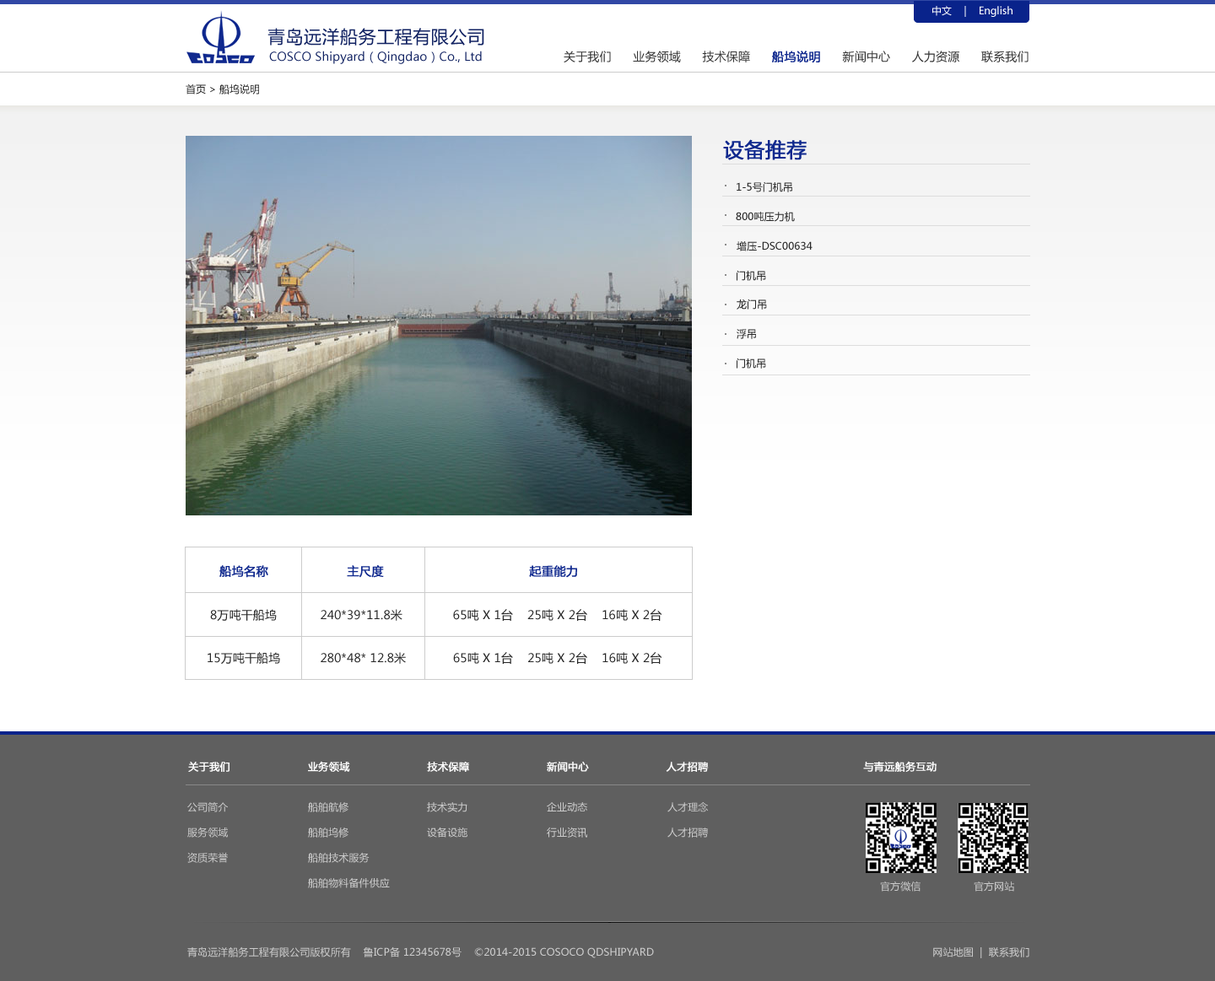
<style>
.page{position:relative;width:1215px;height:981px;background:#ffffff}
.page>*{position:absolute;margin:0}
.t1{font:10.1px "MicrosoftYaHei";color:#ffffff}
.t2{font:17.7px "MicrosoftYaHei";letter-spacing:0.025em;color:#112262;text-transform:uppercase}
.t3{font:11.8px "MicrosoftYaHei";letter-spacing:0.01em;color:#112262}
.t4{font:11.8px "MicrosoftYaHei";letter-spacing:0.01em;color:#333333;text-transform:uppercase}
.t5{font:11.8px "MicrosoftYaHei";letter-spacing:0.01em;color:#10298e;text-transform:uppercase;font-weight:bold}
.t6{font:10.1px "MicrosoftYaHei";color:#272727}
.t7{font:20.3px "MicrosoftYaHei";letter-spacing:0.01em;color:#10298e;text-transform:uppercase;font-weight:bold}
.t8{font:10.1px "MicrosoftYaHei";letter-spacing:0.01em;color:#272727;text-transform:uppercase}
.t9{font:11.8px "MicrosoftYaHei";letter-spacing:0.01em;color:#272727;text-transform:uppercase}
.t10{font:10.1px "MicrosoftYaHei";letter-spacing:0.01em;color:#ffffff;text-transform:uppercase;font-weight:bold}
.t11{font:10.1px/25.3px "MicrosoftYaHei";letter-spacing:0.01em;color:#cccccc;text-transform:uppercase}
.t12{font:10.1px "MicrosoftYaHei";letter-spacing:0.01em;color:#cccccc;text-transform:uppercase}
</style>
<div class="page">
<p class="t1" style="left:932px;top:6px;width:81px;height:11px">中文    |    English</p>
<p class="t2" style="left:267px;top:28px;width:217px;height:18px">青岛远洋船务工程有限公司</p>
<p class="t3" style="left:269px;top:51px;width:213px;height:13px">COSCO Shipyard（Qingdao）Co., Ltd</p>
<p class="t4" style="left:564px;top:51px;width:465px;height:12px">关于我们      业务领域      技术保障      <span class="t5">船坞说明</span>      新闻中心      人力资源      联系我们</p>
<p class="t6" style="left:186px;top:84px;width:73px;height:11px">首页 &gt; 船坞说明</p>
<p class="t7" style="left:723px;top:139px;width:84px;height:21px">设备推荐</p>
<p class="t8" style="left:737px;top:181px;width:55px;height:11px">1-5号门机吊</p>
<p class="t8" style="left:736px;top:212px;width:59px;height:10px">800吨压力机</p>
<p class="t8" style="left:737px;top:241px;width:76px;height:10px">增压-DSC00634</p>
<p class="t8" style="left:737px;top:270px;width:29px;height:11px">门机吊</p>
<p class="t8" style="left:737px;top:299px;width:30px;height:11px">龙门吊</p>
<p class="t8" style="left:737px;top:329px;width:19px;height:10px">浮吊</p>
<p class="t8" style="left:737px;top:358px;width:29px;height:11px">门机吊</p>
<p class="t5" style="left:219px;top:565px;width:358px;height:13px">船坞名称                    主尺度                                     起重能力</p>
<p class="t9" style="left:210px;top:609px;width:452px;height:12px">8万吨干船坞            240*39*11.8米              65吨 X 1台    25吨 X 2台    16吨 X 2台</p>
<p class="t9" style="left:208px;top:652px;width:454px;height:12px">15万吨干船坞           280*48* 12.8米             65吨 X 1台    25吨 X 2台    16吨 X 2台</p>
<p class="t10" style="left:188px;top:761px;width:749px;height:11px">关于我们                       业务领域                       技术保障                       新闻中心                       人才招聘                                              与青远船务互动</p>
<p class="t11" style="left:187px;top:802px;width:41px;height:61px">公司简介<br>服务领域<br>资质荣誉</p>
<p class="t11" style="left:308px;top:802px;width:82px;height:87px">船舶航修<br>船舶坞修<br>船舶技术服务<br>船舶物料备件供应</p>
<p class="t11" style="left:427px;top:802px;width:40px;height:36px">技术实力<br>设备设施</p>
<p class="t11" style="left:547px;top:802px;width:41px;height:36px">企业动态<br>行业资讯</p>
<p class="t11" style="left:667px;top:802px;width:41px;height:36px">人才理念<br>人才招聘</p>
<p class="t12" style="left:880px;top:882px;width:134px;height:10px">官方微信                 官方网站</p>
<p class="t12" style="left:187px;top:947px;width:842px;height:12px">青岛远洋船务工程有限公司版权所有    鲁ICP备 12345678号    ©2014-2015 COSOCO QDSHIPYARD                                                                                          网站地图  |  联系我们</p>
</div>
